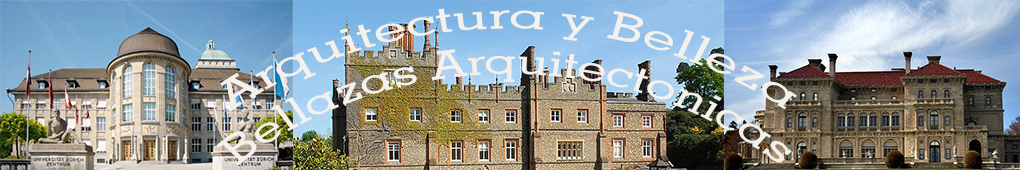
<style>
.page{position:relative;width:1020px;height:170px}
.page>*{position:absolute;margin:0}
.t1{font:37.9px "GeometricSlab703BT-Medium";color:#f4f1ec;scale:1.16 1}
</style>
<div class="page">
<p class="t1" style="left:216px;top:8px;width:581px;height:158px;text-align:center">Arquitectura y Belleza<br>Bellazas Arquitectonicas</p>
</div>
